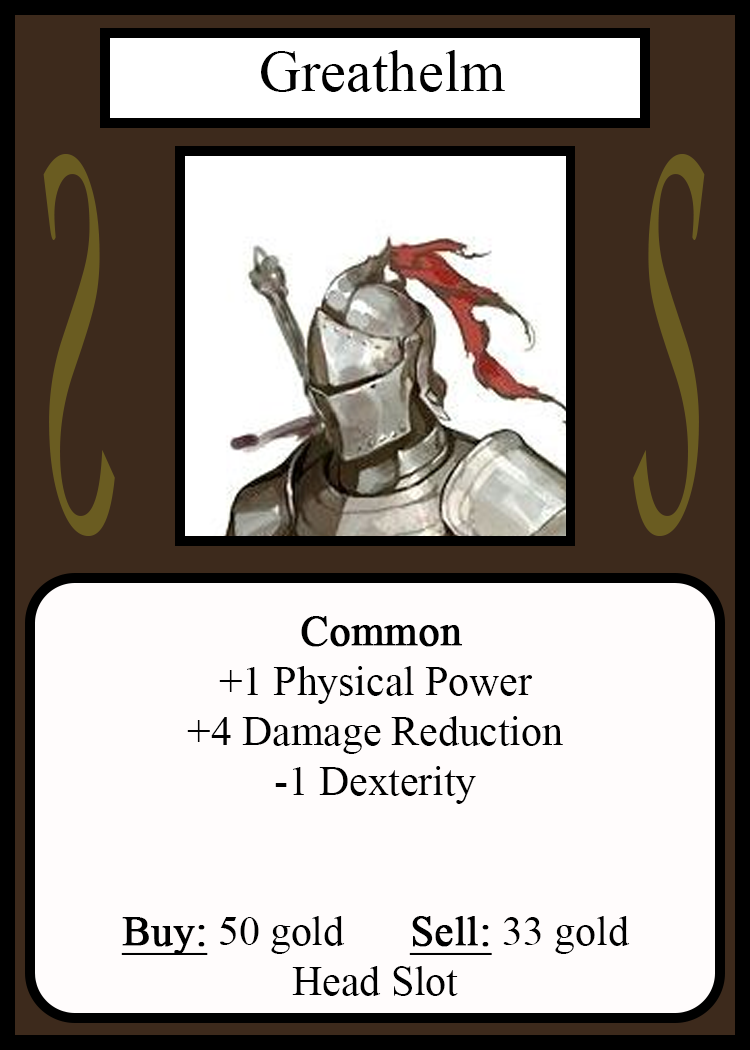
<style>
.page{position:relative;width:750px;height:1050px;background:#fffcfc}
.page>*{position:absolute;margin:0}
.t1{font:58.3px "TimesNewRomanPSMT";color:#010101}
.t2{font:548.5px "Apple-Chancery";color:#6a5c21;scale:0.27 1}
.t3{font:548.2px "Apple-Chancery";color:#6a5c21;scale:0.27 1}
.t4{font:41.7px "TimesNewRomanPSMT";color:#000000}
.t5{font:41.7px "TimesNewRomanPSMT";color:#000000;font-weight:bold}
.t6{font:41.7px "TimesNewRomanPSMT";color:#000000;font-weight:bold;text-decoration:underline}
</style>
<div class="page">
<p class="t1" style="left:261px;top:50px;width:244px;height:42px">Greathelm</p>
<p class="t2" style="left:43px;top:154px;width:72px;height:382px;rotate:180deg">S</p>
<p class="t3" style="left:633px;top:154px;width:72px;height:382px">S</p>
<p class="t4" style="left:121px;top:616px;width:509px;height:380px;text-align:center"><span class="t5"> Common</span><br>+1 Physical Power<br>+4 Damage Reduction<br>-1 Dexterity<br><br><br><span class="t6">Buy:</span> 50 gold   <span class="t6">Sell:</span> 33 gold<br>Head Slot</p>
</div>
